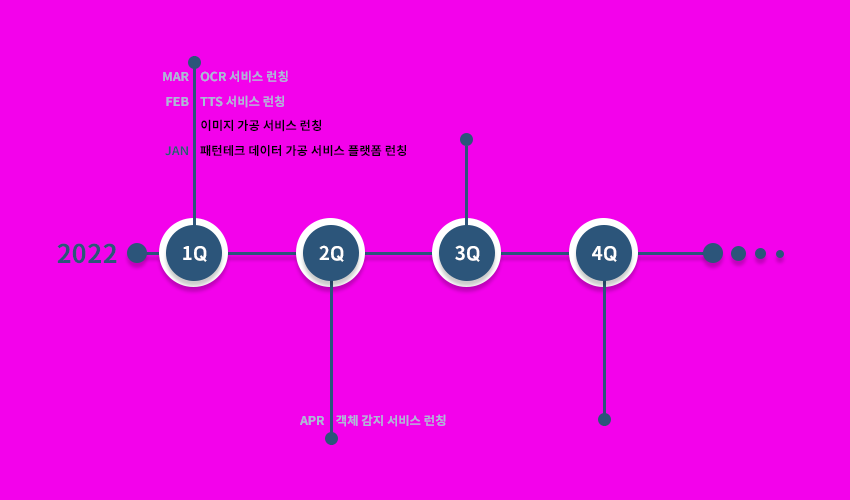
<style>
.page{position:relative;width:850px;height:500px;background:#f302eb}
.page>*{position:absolute;margin:0}
.t1{font:12.3px "NotoSansKR-Bold";color:#a5bed4;text-transform:uppercase}
.t2{font:12.3px "NotoSansKR-Bold";color:#000000;text-transform:uppercase}
.t3{font:12px "NotoSansKR-Bold";color:#2c557a;text-transform:uppercase;scale:1.03 1}
.t4{font:12px "NotoSansKR-Bold";color:#000000;text-transform:uppercase;scale:1.03 1}
.t5{font:26px "NotoSansKR-Bold";color:#2c557a;text-transform:uppercase}
.t6{font:18.8px "NotoSansKR-Bold";color:#ffffff;text-transform:uppercase}
.t7{font:19.9px "NanumSquareOTFEB";color:#ffffff;text-transform:uppercase}
.t8{font:12.1px "NotoSansKR-Bold";color:#a5bed4;text-transform:uppercase}
</style>
<div class="page">
<p class="t1" style="left:163px;top:72px;width:26px;height:9px">MAR</p>
<p class="t1" style="left:200px;top:70px;width:88px;height:13px">OCR 서비스 런칭</p>
<p class="t1" style="left:166px;top:97px;width:23px;height:9px">FEB</p>
<p class="t1" style="left:200px;top:95px;width:84px;height:13px">TTS 서비스 런칭</p>
<p class="t2" style="left:201px;top:119px;width:120px;height:13px">이미지 가공 서비스 런칭</p>
<p class="t3" style="left:165px;top:146px;width:23px;height:10px">JAN</p>
<p class="t4" style="left:200px;top:145px;width:206px;height:12px">패턴테크 데이터 가공 서비스 플랫폼 런칭</p>
<p class="t5" style="left:57px;top:243px;width:60px;height:21px">2022</p>
<p class="t6" style="left:183px;top:246px;width:24px;height:16px">1<span class="t7">Q</span></p>
<p class="t6" style="left:319px;top:245px;width:25px;height:17px">2<span class="t7">Q</span></p>
<p class="t6" style="left:455px;top:245px;width:25px;height:17px">3<span class="t7">Q</span></p>
<p class="t6" style="left:592px;top:246px;width:25px;height:16px">4<span class="t7">Q</span></p>
<p class="t8" style="left:336px;top:414px;width:110px;height:13px">객체 감지 서비스 런칭</p>
<p class="t8" style="left:300px;top:416px;width:24px;height:9px">APR</p>
</div>
